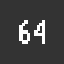
<style>
.page{position:relative;width:64px;height:64px;background:#333333}
.page>*{position:absolute;margin:0}
.t1{font:40.9px "Glasstown-NBP";letter-spacing:0.005em;color:#ffffff;font-weight:bold}
</style>
<div class="page">
<p class="t1" style="left:19px;top:20px;width:26px;height:24px">64</p>
</div>
